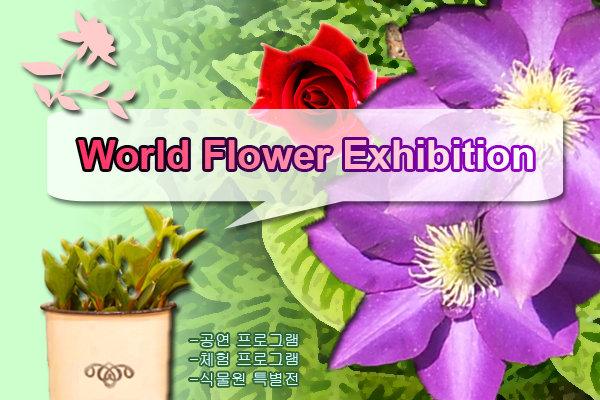
<style>
.page{position:relative;width:600px;height:400px}
.page>*{position:absolute;margin:0}
.t1{font:40px "Arial-BoldMT"}
.t2{font:16.1px "Gulim";color:#ccffff}
</style>
<div class="page">
<p class="t1" style="left:78px;top:140px;width:455px;height:29px">World Flower Exhibition</p>
<p class="t2" style="left:190px;top:334px;width:108px;height:52px">-공연 프로그램<br>-체험 프로그램<br>-식물원 특별전</p>
</div>
